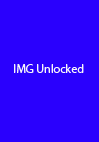
<style>
.page{position:relative;width:99px;height:142px;background:#2a00fd}
.page>*{position:absolute;margin:0}
.t1{font:12px "MyriadPro-Regular";color:#f7f6fa}
</style>
<div class="page">
<p class="t1" style="left:14px;top:64px;width:70px;height:9px">IMG Unlocked</p>
</div>
